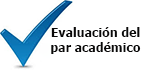
<style>
.page{position:relative;width:150px;height:70px;background:#ffffff}
.page>*{position:absolute;margin:0}
.t1{font:12.4px "Tahoma-Bold";color:#0a0909}
</style>
<div class="page">
<p class="t1" style="left:51px;top:27px;width:90px;height:27px;text-align:center">Evaluación del par académico</p>
</div>
